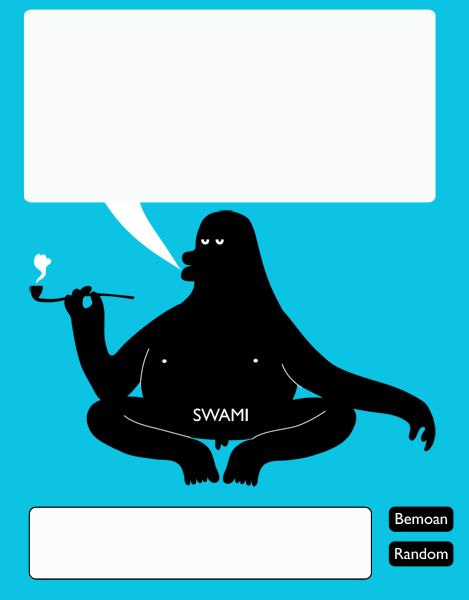
<style>
.page{position:relative;width:469px;height:600px;background:#0dc3e4}
.page>*{position:absolute;margin:0}
.t1{font:18px "GillSansMT";color:#f9fbfb}
.t2{font:16.2px "GillSansMT";color:#f9fbfb}
</style>
<div class="page">
<p class="t1" style="left:193px;top:408px;width:55px;height:14px">SWAMI</p>
<p class="t2" style="left:395px;top:512px;width:53px;height:13px">Bemoan</p>
<p class="t2" style="left:395px;top:547px;width:53px;height:13px">Random</p>
</div>
